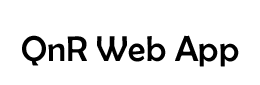
<style>
.page{position:relative;width:260px;height:85px;background:#ffffff}
.page>*{position:absolute;margin:0}
.t1{font:36px "BerlinSansFB-Reg";color:#000000}
</style>
<div class="page">
<p class="t1" style="left:22px;top:35px;width:217px;height:32px">QnR Web App</p>
</div>
